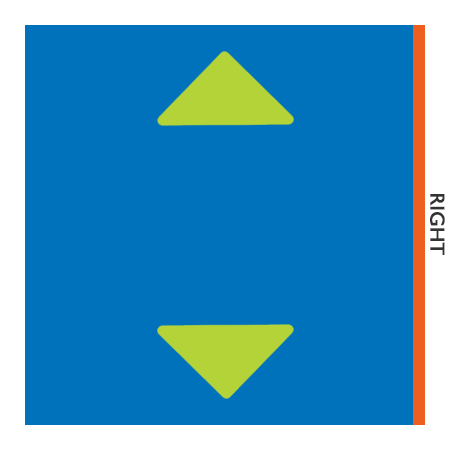
<style>
.page{position:relative;width:450px;height:450px;background:#0072bc}
.page>*{position:absolute;margin:0}
.t1{font:20.4px "GillSansMT";color:#333333;font-weight:bold}
</style>
<div class="page">
<p class="t1" style="left:430px;top:194px;width:15px;height:61px;rotate:90deg">RIGHT</p>
</div>
